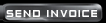
<style>
.page{position:relative;width:106px;height:23px;background:#000000}
.page>*{position:absolute;margin:0}
.t1{font:11.7px "ZeroTwos";letter-spacing:0.1em;color:#ffffff}
</style>
<div class="page">
<p class="t1" style="left:6px;top:10px;width:91px;height:7px">SEND INVOICE</p>
</div>
